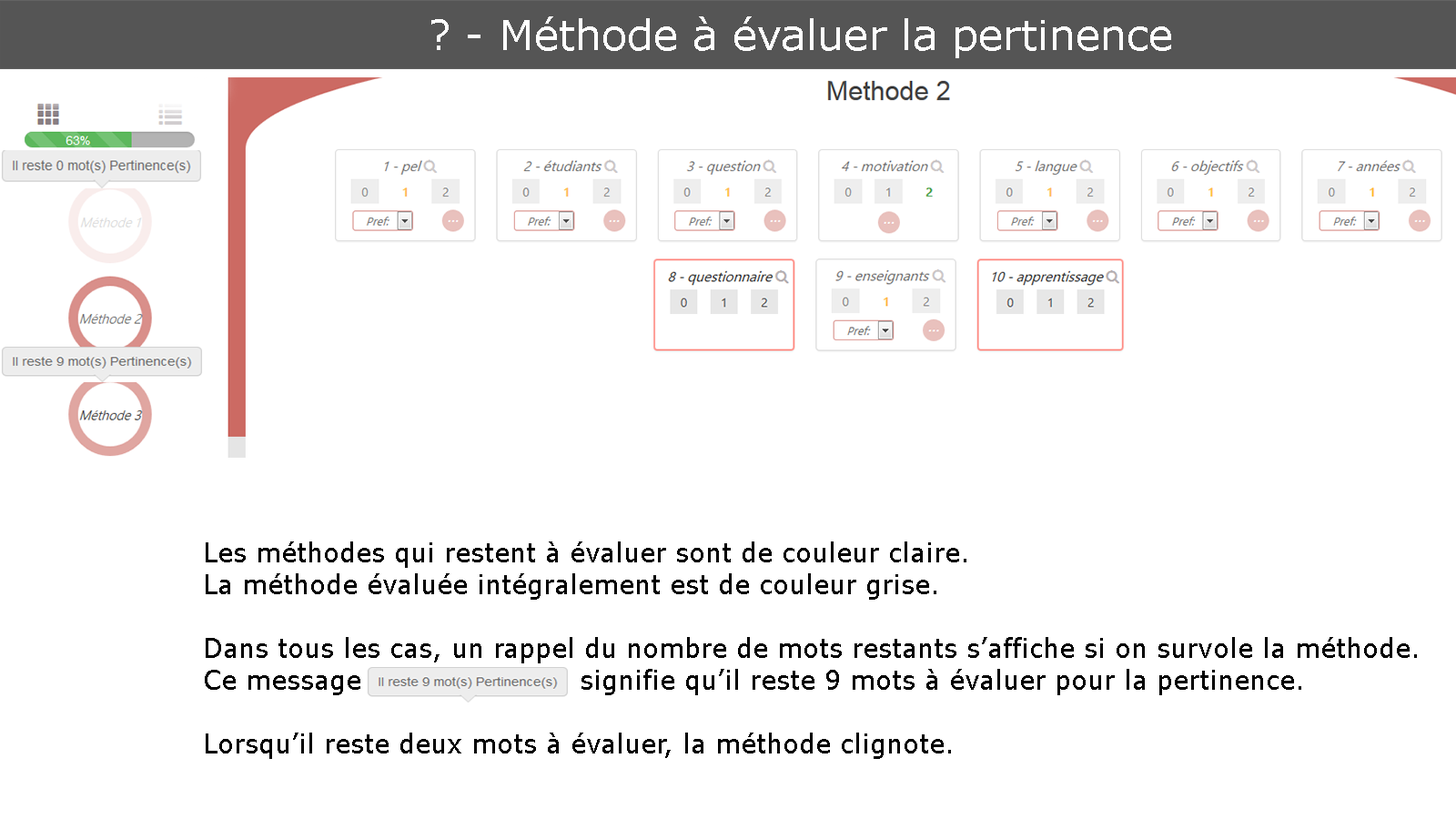
<style>
.page{position:relative;width:1456px;height:819px;background:#ffffff}
.page>*{position:absolute;margin:0}
.t1{font:41.7px "Verdana";color:#ffffff}
.t2{font:26.5px "Verdana";color:#000000}
</style>
<div class="page">
<p class="t1" style="left:431px;top:16px;width:740px;height:42px">? - Méthode à évaluer la pertinence</p>
<p class="t2" style="left:205px;top:541px;width:1212px;height:218px">Les méthodes qui restent à évaluer sont de couleur claire.<br>La méthode évaluée intégralement est de couleur grise.<br><br>Dans tous les cas, un rappel du nombre de mots restants s’affiche si on survole la méthode.<br>Ce message                        signifie qu’il reste 9 mots à évaluer pour la pertinence.<br><br>Lorsqu’il reste deux mots à évaluer, la méthode clignote.</p>
</div>
